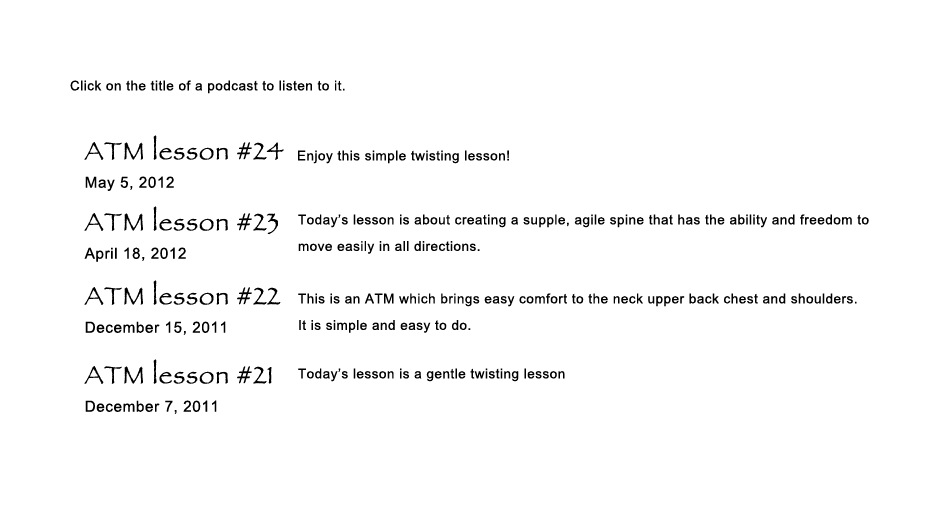
<style>
.page{position:relative;width:950px;height:523px;background:#ffffff}
.page>*{position:absolute;margin:0}
.t1{font:23px "ArialMT";letter-spacing:0.04em;color:#000000}
.t2{font:43.3px/22.8px "Papyrus";letter-spacing:0.04em;color:#000000}
.t3{font:26.1px/22.8px "ArialMT";letter-spacing:0.04em;color:#000000}
.t4{font:23px/26.5px "ArialMT";letter-spacing:0.04em;color:#000000}
</style>
<div class="page">
<p class="t1" style="left:70px;top:80px;width:275px;height:14px">Click on the title of a podcast to listen to it.</p>
<p class="t2" style="left:84px;top:135px;width:200px;height:56px">ATM lesson #24<br><span class="t3">May 5, 2012</span></p>
<p class="t1" style="left:298px;top:150px;width:211px;height:14px">Enjoy this simple twisting lesson!</p>
<p class="t2" style="left:84px;top:206px;width:194px;height:56px">ATM lesson #23<br><span class="t3">April 18, 2012</span></p>
<p class="t4" style="left:298px;top:214px;width:571px;height:40px">Today’s lesson is about creating a supple, agile spine that has the ability and freedom to <br>move easily in all directions.</p>
<p class="t3" style="left:84px;top:280px;width:197px;height:55px"><span class="t2">ATM lesson #22<br></span>December 15, 2011</p>
<p class="t4" style="left:298px;top:293px;width:559px;height:40px">This is an ATM which brings easy comfort to the neck upper back chest and shoulders.  <br>It is simple and easy to do.</p>
<p class="t3" style="left:84px;top:359px;width:188px;height:55px"><span class="t2">ATM lesson #21<br></span>December 7, 2011</p>
<p class="t1" style="left:298px;top:368px;width:267px;height:14px">Today’s lesson is a gentle twisting lesson</p>
</div>
